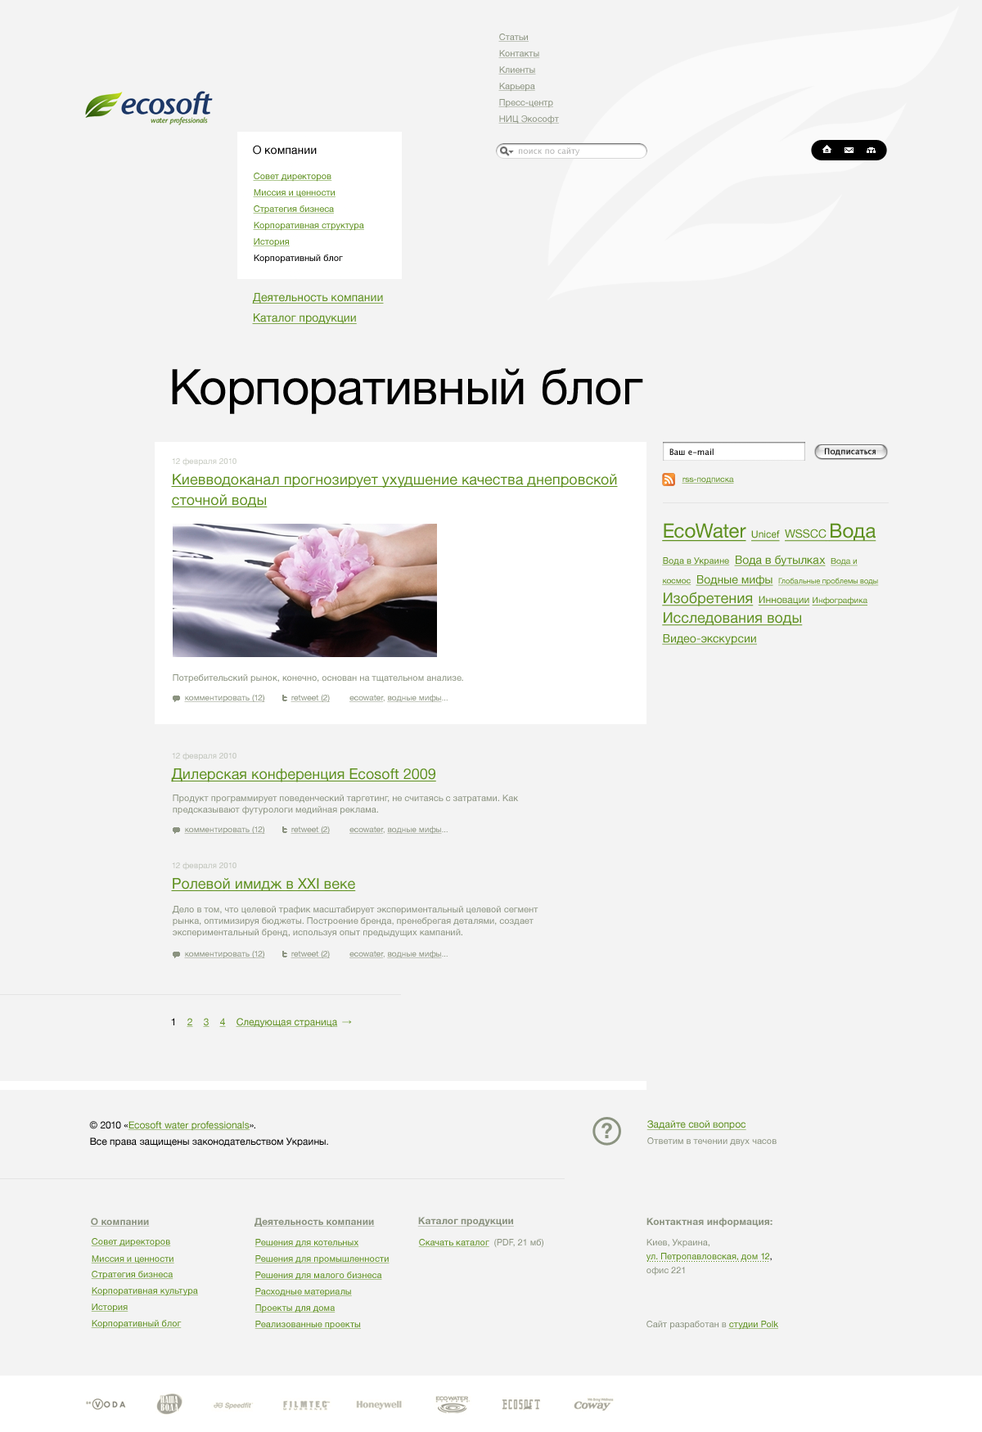
<style>
.page{position:relative;width:982px;height:1432px;background:#f3f3f3}
.page>*{position:absolute;margin:0}
.t1{font:9px "HelveticaNeue";color:#8b9380;text-decoration:underline}
.t2{font:11.5px "HelveticaNeue";color:#000000}
.t3{font:8.2px "LucidaGrande";color:#b2b2b2}
.t4{font:9px "HelveticaNeue";color:#5e901f;text-decoration:underline}
.t5{font:9px "HelveticaNeue";color:#000000}
.t6{font:11.5px "HelveticaNeue";color:#5e901f;text-decoration:underline}
.t7{font:49.1px "HelveticaNeue";color:#000000}
.t8{font:8.2px "LucidaGrande";color:#000000}
.t9{font:8.2px "HelveticaNeue";color:#c5c9bf}
.t10{font:14.7px/20.5px "HelveticaNeue";color:#5e901f;text-decoration:underline}
.t11{font:8.2px "HelveticaNeue";text-decoration:underline}
.t12{font:7.4px/19.6px "HelveticaNeue";color:#5e901f;text-decoration:underline}
.t13{font:19.6px/19.6px "HelveticaNeue";color:#5e901f;text-decoration:underline}
.t14{font:9.8px/19.6px "HelveticaNeue";color:#5e901f;text-decoration:underline}
.t15{font:11.5px/19.6px "HelveticaNeue";color:#5e901f;text-decoration:underline}
.t16{font:19.6px/26.2px "HelveticaNeue";color:#5e901f;text-decoration:underline}
.t17{font:9px/26.2px "HelveticaNeue";color:#5e901f;text-decoration:underline}
.t18{font:11.5px/26.2px "HelveticaNeue";color:#5e901f;text-decoration:underline}
.t19{font:8.2px/19.6px "HelveticaNeue";color:#5e901f;text-decoration:underline}
.t20{font:14.7px/19.6px "HelveticaNeue";color:#5e901f;text-decoration:underline}
.t21{font:9px "HelveticaNeue";color:#8b9380}
.t22{font:8.2px "HelveticaNeue";color:#8b9380;text-decoration:underline}
.t23{font:8.2px "HelveticaNeue";color:#8b9380}
.t24{font:8.2px "HelveticaNeue";color:#bfc3b9}
.t25{font:14.7px "HelveticaNeue";color:#5e901f;text-decoration:underline}
.t26{font:9px/11.5px "HelveticaNeue";color:#8b9380}
.t27{font:9.8px "HelveticaNeue";color:#000000}
.t28{font:9.8px "HelveticaNeue";color:#5e901f;text-decoration:underline}
.t29{font:9.8px "HelveticaNeue";text-decoration:underline}
.t30{font:9.8px "ArialMT"}
.t31{font:9.8px/16.4px "HelveticaNeue";color:#000000}
.t32{font:9.8px/16.4px "HelveticaNeue";color:#5e901f;text-decoration:underline}
.t33{font:9.8px "HelveticaNeue-Bold";color:#8b9380;text-decoration:underline}
.t34{font:9px/13.9px "HelveticaNeue";color:#5e901f}
.t35{font:9.8px/16.4px "HelveticaNeue-Bold";color:#8b9380}
.t36{font:9px/20.5px "HelveticaNeue";color:#8b9380}
.t37{font:9px/13.9px "HelveticaNeue";color:#000000}
.t38{font:9px/13.9px "HelveticaNeue";color:#8b9380}
</style>
<div class="page">
<p class="t1" style="left:498px;top:34px;width:31px;height:8px">Статьи</p>
<p class="t1" style="left:498px;top:50px;width:42px;height:8px">Контакты</p>
<p class="t1" style="left:498px;top:66px;width:38px;height:8px">Клиенты</p>
<p class="t1" style="left:498px;top:83px;width:37px;height:9px">Карьера</p>
<p class="t1" style="left:498px;top:99px;width:55px;height:9px">Пресс-центр</p>
<p class="t1" style="left:498px;top:115px;width:61px;height:9px">НИЦ Экософт</p>
<p class="t2" style="left:253px;top:145px;width:64px;height:10px">О компании</p>
<p class="t3" style="left:519px;top:147px;width:61px;height:8px">поиск по сайту</p>
<p class="t4" style="left:253px;top:173px;width:79px;height:9px">Совет директоров</p>
<p class="t4" style="left:253px;top:189px;width:82px;height:8px">Миссия и ценности</p>
<p class="t4" style="left:253px;top:205px;width:81px;height:9px">Стратегия бизнеса</p>
<p class="t4" style="left:253px;top:222px;width:111px;height:9px">Корпоративная структура</p>
<p class="t4" style="left:253px;top:238px;width:37px;height:9px">История</p>
<p class="t5" style="left:254px;top:254px;width:89px;height:9px">Корпоративный блог</p>
<p class="t6" style="left:252px;top:293px;width:132px;height:11px">Деятельность компании</p>
<p class="t6" style="left:252px;top:313px;width:105px;height:11px">Каталог продукции</p>
<p class="t7" style="left:172px;top:368px;width:471px;height:46px">Корпоративный блог</p>
<p class="t8" style="left:669px;top:448px;width:44px;height:7px">Ваш e-mail</p>
<p class="t8" style="left:825px;top:448px;width:50px;height:8px">Подписаться</p>
<p class="t9" style="left:172px;top:457px;width:64px;height:9px">12 февраля 2010</p>
<p class="t10" style="left:171px;top:474px;width:447px;height:33px">Киевводоканал прогнозирует ухудшение качества днепровской<br>сточной воды</p>
<p class="t11" style="left:682px;top:477px;width:52px;height:7px">rss-подписка</p>
<p class="t12" style="left:662px;top:523px;width:217px;height:122px"><span class="t13">EcoWater  </span><span class="t14">Unicef  </span><span class="t15">WSSCC </span><span class="t16">Вода  </span><span class="t17">Вода в Украине  </span><span class="t18">Вода в </span><span class="t15">бутылках  </span><span class="t19">Вода и космос  </span><span class="t15">Водные мифы  </span>Глобальные проблемы воды <span class="t20">Изобретения  </span><span class="t14">Инновации </span><span class="t19">Инфографика  </span><span class="t20">Исследования воды </span><span class="t15">Видео-экскурсии</span></p>
<p class="t21" style="left:173px;top:674px;width:290px;height:9px">Потребительский рынок, конечно, основан на тщательном анализе.</p>
<p class="t22" style="left:184px;top:694px;width:81px;height:8px">комментировать (12)</p>
<p class="t22" style="left:290px;top:694px;width:40px;height:8px">retweet (2)</p>
<p class="t22" style="left:349px;top:694px;width:99px;height:8px">ecowater<span class="t23">, </span>водные мифы<span class="t23">...</span></p>
<p class="t24" style="left:172px;top:752px;width:64px;height:8px">12 февраля 2010</p>
<p class="t25" style="left:171px;top:768px;width:265px;height:14px">Дилерская конференция Ecosoft 2009</p>
<p class="t26" style="left:173px;top:794px;width:346px;height:21px">Продукт программирует поведенческий таргетинг, не считаясь с затратами. Как предсказывают футурологи медийная реклама.</p>
<p class="t22" style="left:184px;top:826px;width:81px;height:8px">комментировать (12)</p>
<p class="t22" style="left:290px;top:826px;width:40px;height:8px">retweet (2)</p>
<p class="t22" style="left:349px;top:826px;width:99px;height:8px">ecowater<span class="t23">, </span>водные мифы<span class="t23">...</span></p>
<p class="t24" style="left:172px;top:862px;width:64px;height:8px">12 февраля 2010</p>
<p class="t25" style="left:171px;top:878px;width:185px;height:13px">Ролевой имидж в XXI веке</p>
<p class="t26" style="left:172px;top:906px;width:366px;height:32px">Дело в том, что целевой трафик масштабирует экспериментальный целевой сегмент рынка, оптимизируя бюджеты. Построение бренда, пренебрегая деталями, создает экспериментальный бренд, используя опыт предыдущих кампаний.</p>
<p class="t22" style="left:184px;top:950px;width:81px;height:8px">комментировать (12)</p>
<p class="t22" style="left:290px;top:950px;width:40px;height:8px">retweet (2)</p>
<p class="t22" style="left:349px;top:950px;width:99px;height:8px">ecowater<span class="t23">, </span>водные мифы<span class="t23">...</span></p>
<p class="t27" style="left:171px;top:1018px;width:3px;height:7px">1</p>
<p class="t28" style="left:187px;top:1018px;width:6px;height:9px">2</p>
<p class="t29" style="left:203px;top:1018px;width:6px;height:9px">3</p>
<p class="t28" style="left:219px;top:1018px;width:7px;height:9px">4</p>
<p class="t28" style="left:236px;top:1018px;width:102px;height:10px">Следующая страница</p>
<p class="t30" style="left:342px;top:1019px;width:10px;height:5px">→</p>
<p class="t31" style="left:89px;top:1121px;width:239px;height:26px">© 2010 «<span class="t32">Ecosoft water professionals</span>».<br>Все права защищены законодательством Украины.</p>
<p class="t28" style="left:646px;top:1120px;width:100px;height:10px">Задайте свой вопрос</p>
<p class="t21" style="left:647px;top:1137px;width:129px;height:9px">Ответим в течении двух часов</p>
<p class="t33" style="left:90px;top:1217px;width:60px;height:9px">О компании</p>
<p class="t33" style="left:254px;top:1217px;width:121px;height:9px">Деятельность компании</p>
<p class="t33" style="left:417px;top:1217px;width:97px;height:9px">Каталог продукции</p>
<p class="t34" style="left:646px;top:1217px;width:126px;height:59px"><span class="t35">Контактная информация:<br></span><span class="t36">Киев, Украина,<br></span>ул. Петропавловская, дом 12<span class="t37">,<br></span><span class="t38">офис 221</span></p>
<p class="t4" style="left:91px;top:1238px;width:80px;height:9px">Совет директоров</p>
<p class="t4" style="left:254px;top:1239px;width:105px;height:8px">Решения для котельных</p>
<p class="t4" style="left:418px;top:1239px;width:71px;height:8px">Скачать каталог</p>
<p class="t21" style="left:494px;top:1239px;width:49px;height:9px">(PDF, 21 мб)</p>
<p class="t4" style="left:91px;top:1255px;width:83px;height:8px">Миссия и ценности</p>
<p class="t4" style="left:254px;top:1255px;width:135px;height:9px">Решения для промышленности</p>
<p class="t4" style="left:91px;top:1271px;width:82px;height:9px">Стратегия бизнеса</p>
<p class="t4" style="left:254px;top:1271px;width:128px;height:9px">Решения для малого бизнеса</p>
<p class="t4" style="left:91px;top:1287px;width:107px;height:9px">Корпоративная культура</p>
<p class="t4" style="left:254px;top:1288px;width:98px;height:9px">Расходные материалы</p>
<p class="t4" style="left:91px;top:1303px;width:37px;height:9px">История</p>
<p class="t4" style="left:254px;top:1304px;width:81px;height:9px">Проекты для дома</p>
<p class="t4" style="left:91px;top:1320px;width:91px;height:9px">Корпоративный блог</p>
<p class="t4" style="left:254px;top:1321px;width:107px;height:9px">Реализованные проекты</p>
<p class="t21" style="left:646px;top:1321px;width:132px;height:9px">Сайт разработан в <span class="t4">студии Polk</span></p>
</div>
